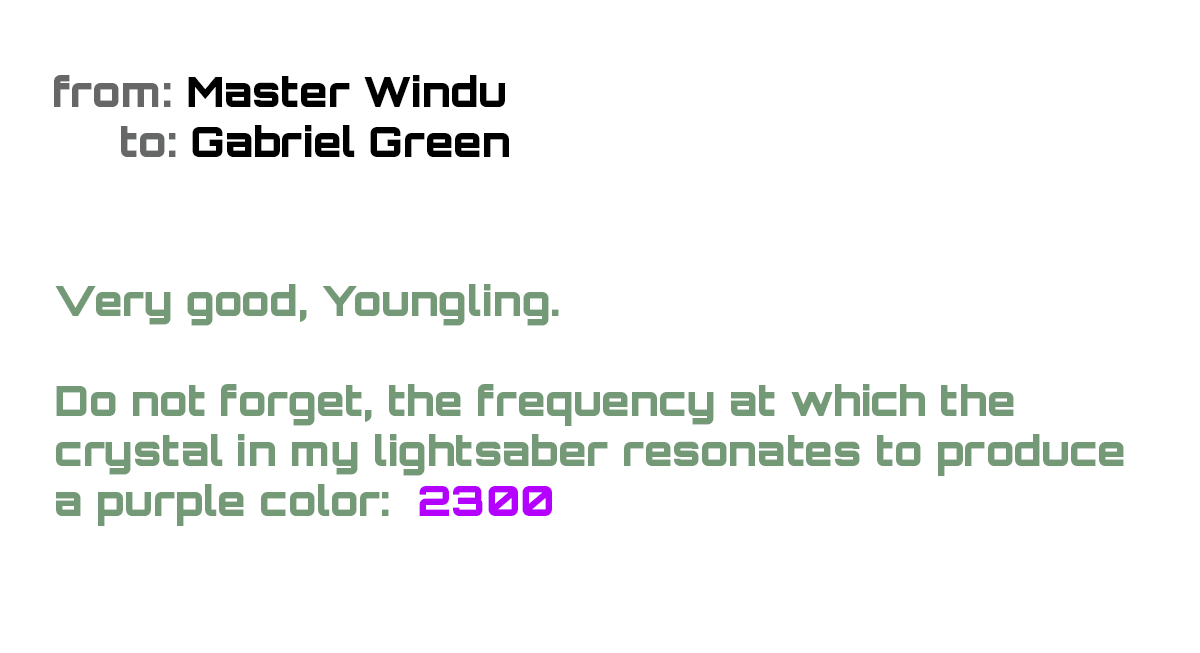
<style>
.page{position:relative;width:1200px;height:653px;background:#ffffff}
.page>*{position:absolute;margin:0}
.t1{font:41.7px "Orbitron-Black";color:#000000}
.t2{font:41.7px "Orbitron-Black";color:#676767}
.t3{font:41.7px "Orbitron-Black";color:#666767}
.t4{font:41.7px "Orbitron-Black";color:#749976}
.t5{font:41.7px "Orbitron-Black";color:#b400ff}
</style>
<div class="page">
<p class="t1" style="left:54px;top:75px;width:455px;height:82px"><span class="t2">from:</span> Master Windu<br>   <span class="t3">  to:</span> Gabriel Green</p>
<p class="t4" style="left:55px;top:284px;width:1069px;height:242px">Very good, Youngling. <br><br>Do not forget, the frequency at which the crystal in my lightsaber resonates to produce a purple color:  <span class="t5">2300</span></p>
</div>
